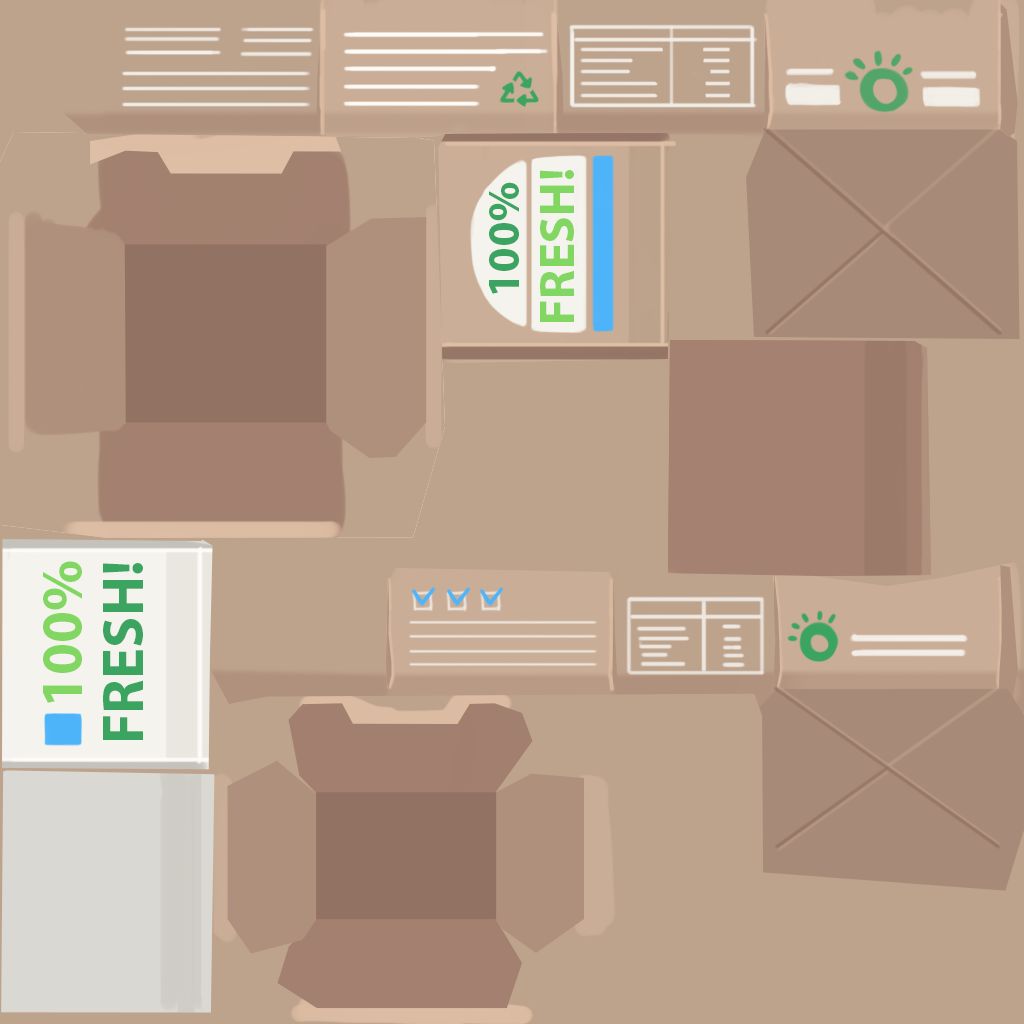
<style>
.page{position:relative;width:1024px;height:1024px;background:#bda28c}
.page>*{position:absolute;margin:0}
.t1{font:50px "MyriadPro-Bold";color:#82d763}
.t2{font:45.8px "MyriadPro-Bold";color:#3ba460}
.t3{font:58.2px "MyriadPro-Bold";color:#82d763}
.t4{font:58.2px "MyriadPro-Bold";color:#3ba460}
</style>
<div class="page">
<p class="t1" style="left:540px;top:170px;width:34px;height:152px;rotate:-90deg">FRESH!</p>
<p class="t2" style="left:489px;top:182px;width:30px;height:112px;rotate:-90deg">100%</p>
<p class="t3" style="left:43px;top:561px;width:39px;height:142px;rotate:-90deg">100%</p>
<p class="t4" style="left:103px;top:563px;width:40px;height:177px;rotate:-90deg">FRESH!</p>
</div>
